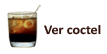
<style>
.page{position:relative;width:107px;height:54px;background:#ffffff}
.page>*{position:absolute;margin:0}
.t1{font:13.3px "Calibri-Bold";color:#35160f;scale:1.05 1}
</style>
<div class="page">
<p class="t1" style="left:44px;top:24px;width:57px;height:11px">Ver coctel</p>
</div>
